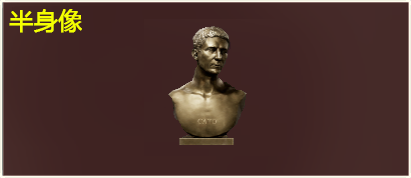
<style>
.page{position:relative;width:411px;height:178px}
.page>*{position:absolute;margin:0}
.t1{font:24px "MicrosoftYaHeiUI";color:#f4ff00;font-weight:bold}
</style>
<div class="page">
<p class="t1" style="left:9px;top:9px;width:73px;height:24px">半身像</p>
</div>
